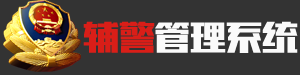
<style>
.page{position:relative;width:300px;height:75px;background:#333333}
.page>*{position:absolute;margin:0}
.t1{font:36px "Tensentype-ChaoHeiJ";color:#d91e18}
.t2{font:36px "Tensentype-ChaoHeiJ";color:#fafafa}
</style>
<div class="page">
<p class="t1" style="left:83px;top:21px;width:72px;height:32px">辅警</p>
<p class="t2" style="left:155px;top:21px;width:143px;height:32px">管理系统</p>
</div>
